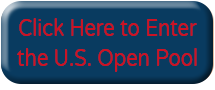
<style>
.page{position:relative;width:215px;height:90px;background:#093b60}
.page>*{position:absolute;margin:0}
.t1{font:24.8px "VarelaRound-Regular";color:#cd1223;scale:0.82 1}
</style>
<div class="page">
<p class="t1" style="left:17px;top:18px;width:180px;height:54px;text-align:center">Click Here to Enter the U.S. Open Pool</p>
</div>
